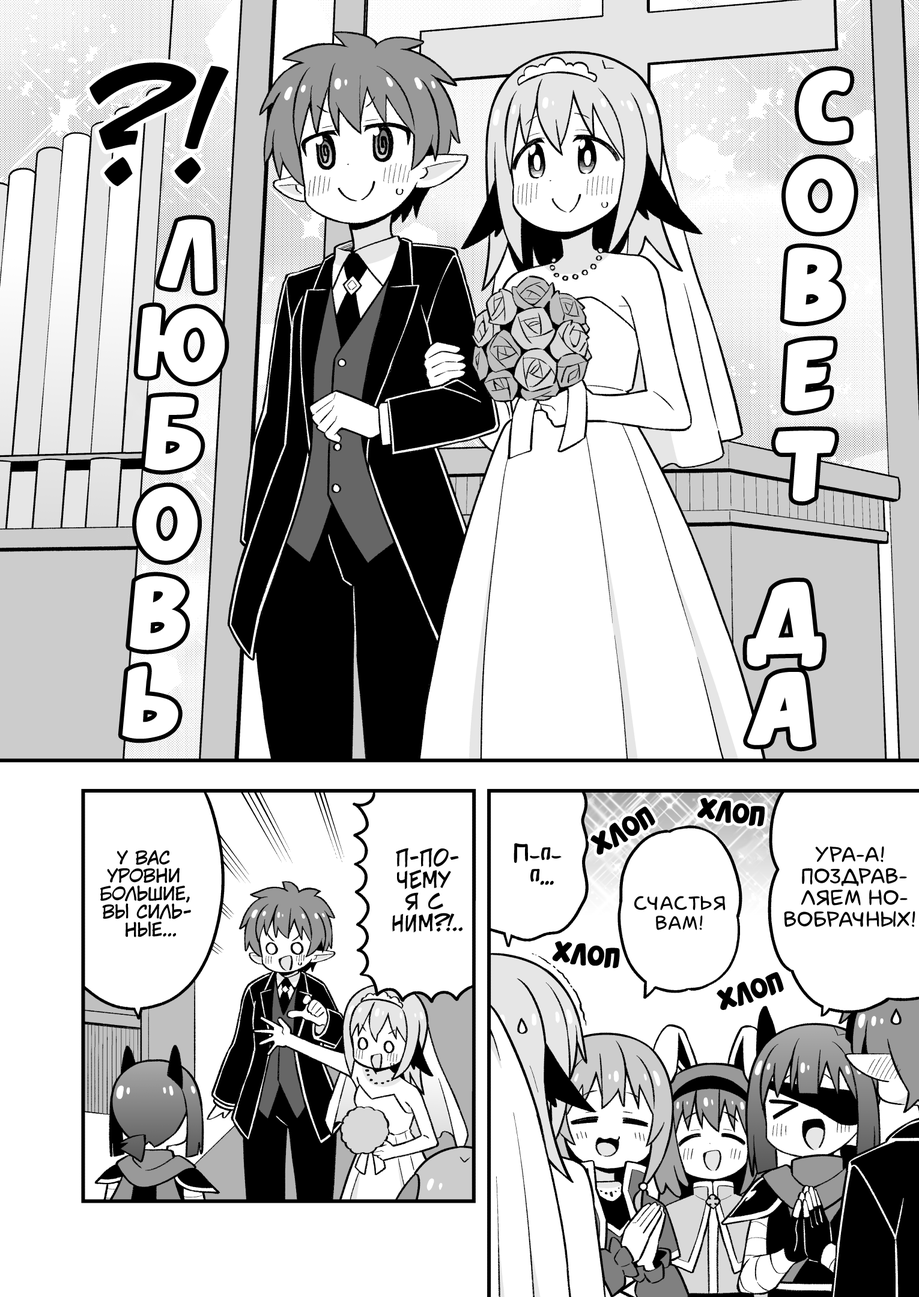
<style>
.page{position:relative;width:919px;height:1297px;background:#ffffff}
.page>*{position:absolute;margin:0}
.t1{font:144.2px "v_CCJeffCampbell";color:#000000}
.t2{font:108.1px "v_CCBellyLaugh";color:#ffffff;scale:0.83 1}
.t3{font:108.1px "v_CCBellyLaugh";color:#ffffff;text-transform:uppercase;scale:0.83 1}
.t4{font:25.2px "v_CCBellyLaugh";color:#000000}
.t5{font:21.6px "AkbarPlain";color:#000000}
.t6{font:18px "KuraiVoice2";color:#000000;text-transform:uppercase}
.t7{font:21.6px "v_CCJeffCampbell";color:#000000;text-transform:uppercase}
.t8{font:18px "v_CCJeffCampbell";color:#000000;text-transform:uppercase}
.t9{font:21.6px "laCartoonerie";color:#000000;text-transform:uppercase}
.t10{font:19.8px "laCartoonerie";color:#000000;text-transform:uppercase}
</style>
<div class="page">
<p class="t1" style="left:90px;top:62px;width:139px;height:124px">?!</p>
<p class="t2" style="left:775px;top:70px;width:79px;height:432px;rotate:3deg">совет</p>
<p class="t3" style="left:122px;top:219px;width:103px;height:520px;rotate:5deg">любовь</p>
<p class="t2" style="left:747px;top:582px;width:75px;height:166px;rotate:3deg">да</p>
<p class="t4" style="left:697px;top:798px;width:68px;height:29px;rotate:8deg">хлоп</p>
<p class="t4" style="left:590px;top:807px;width:65px;height:48px;rotate:-30deg">хлоп</p>
<p class="t5" style="left:514px;top:843px;width:48px;height:42px;text-align:center">П-п-<br>п...</p>
<p class="t6" style="left:100px;top:850px;width:91px;height:88px;text-align:center">У вас<br>уровни<br>большие,<br>вы силь-<br>ные...</p>
<p class="t7" style="left:392px;top:848px;width:71px;height:85px;text-align:center">П-По-<br>чему<br>я с<br>ним?!<span class="t8">..</span></p>
<p class="t9" style="left:784px;top:846px;width:131px;height:81px;text-align:center">Ура-а!<br>поздрав-<br>ляем но-<br>вобрачных!</p>
<p class="t10" style="left:634px;top:896px;width:92px;height:34px;text-align:center">Счастья<br>вам!</p>
<p class="t4" style="left:552px;top:941px;width:68px;height:28px;rotate:6deg">хлоп</p>
<p class="t4" style="left:717px;top:973px;width:67px;height:37px;rotate:-18deg">хлоп</p>
</div>
